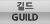
<style>
.page{position:relative;width:50px;height:24px}
.page>*{position:absolute;margin:0}
.t1{font:9px "NanumGothicExtraBold";color:#5c5c5c}
.t2{font:9px "NanumGothicExtraBold";color:#353535}
</style>
<div class="page">
<p class="t1" style="left:17px;top:2px;width:17px;height:9px">길드</p>
<p class="t2" style="left:12px;top:13px;width:26px;height:8px">GUILD</p>
</div>
